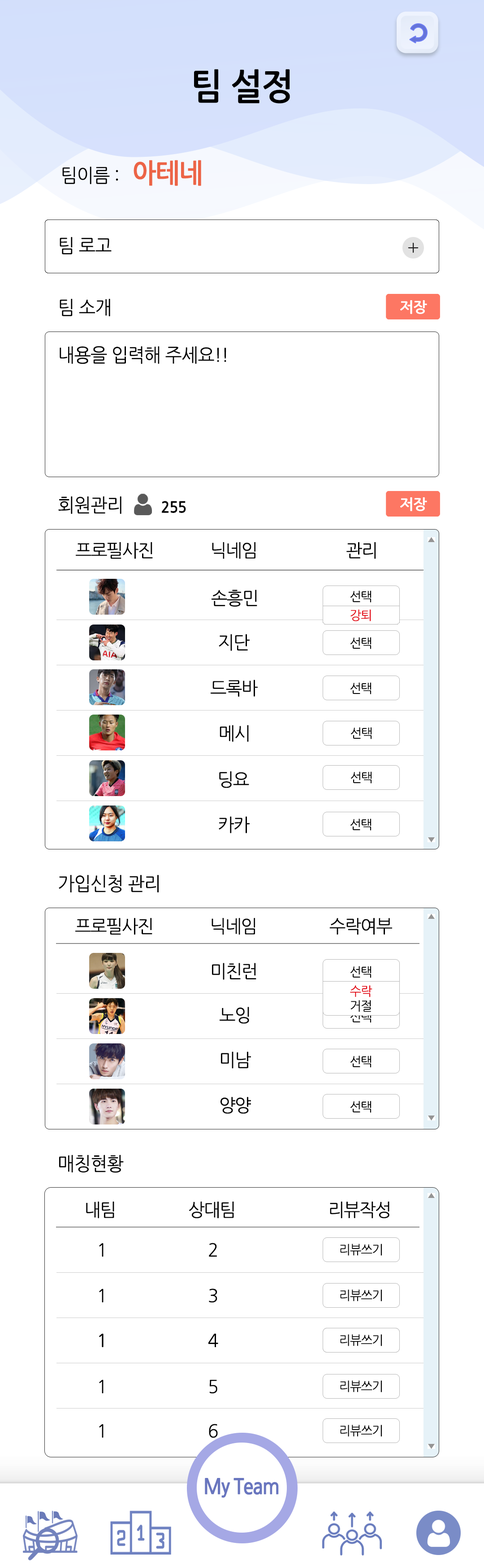
<style>
.page{position:relative;width:484px;height:1568px;background:#ffffff}
.page>*{position:absolute;margin:0}
.t1{font:35.8px "NanumGothicBold";letter-spacing:-0.025em;color:#000000;scale:0.95 1}
.t2{font:26.9px "NanumGothicBold";letter-spacing:-0.025em;color:#ec6446;scale:0.95 1}
.t3{font:18.8px "NanumGothic";letter-spacing:-0.025em;color:#000000;scale:0.95 1}
.t4{font:14.3px "NanumGothicBold";letter-spacing:-0.025em;color:#ffffff}
.t5{font:15.2px "NanumGothicBold";letter-spacing:-0.025em;color:#000000;scale:0.95 1}
.t6{font:17.9px "NanumGothic";letter-spacing:-0.05em;color:#000000}
.t7{font:12.5px "NanumGothic";letter-spacing:-0.05em;color:#000000}
.t8{font:12.5px "NanumGothic";letter-spacing:-0.05em;color:#e30613}
.t9{font:12.5px "NanumGothic";letter-spacing:-0.05em}
</style>
<div class="page">
<p class="t1" style="left:194px;top:69px;width:96px;height:34px">팀 설정</p>
<p class="t2" style="left:134px;top:160px;width:67px;height:26px">아테네</p>
<p class="t3" style="left:62px;top:167px;width:56px;height:17px">팀이름 :</p>
<p class="t3" style="left:60px;top:237px;width:52px;height:17px">팀 로고</p>
<p class="t3" style="left:60px;top:299px;width:50px;height:17px">팀 소개</p>
<p class="t4" style="left:400px;top:300px;width:27px;height:14px">저장</p>
<p class="t3" style="left:60px;top:346px;width:166px;height:18px">내용을 입력해 주세요!!</p>
<p class="t3" style="left:58px;top:496px;width:63px;height:18px">회원관리</p>
<p class="t4" style="left:400px;top:497px;width:27px;height:14px">저장</p>
<p class="t5" style="left:162px;top:501px;width:24px;height:12px">255</p>
<p class="t6" style="left:76px;top:542px;width:300px;height:17px">프로필사진              닉네임                      관리</p>
<p class="t6" style="left:211px;top:590px;width:46px;height:17px">손흥민</p>
<p class="t7" style="left:350px;top:590px;width:21px;height:13px">선택</p>
<p class="t8" style="left:350px;top:609px;width:21px;height:12px">강퇴</p>
<p class="t6" style="left:219px;top:634px;width:31px;height:17px">지단</p>
<p class="t7" style="left:350px;top:637px;width:21px;height:12px">선택</p>
<p class="t6" style="left:211px;top:680px;width:47px;height:17px">드록바</p>
<p class="t7" style="left:350px;top:682px;width:21px;height:12px">선택</p>
<p class="t6" style="left:220px;top:725px;width:29px;height:17px">메시</p>
<p class="t7" style="left:351px;top:727px;width:20px;height:12px">선택</p>
<p class="t6" style="left:219px;top:771px;width:30px;height:17px">딩요</p>
<p class="t7" style="left:351px;top:771px;width:20px;height:13px">선택</p>
<p class="t6" style="left:219px;top:816px;width:31px;height:17px">카카</p>
<p class="t7" style="left:350px;top:818px;width:21px;height:13px">선택</p>
<p class="t3" style="left:59px;top:875px;width:100px;height:18px">가입신청 관리</p>
<p class="t6" style="left:75px;top:918px;width:317px;height:17px">프로필사진              닉네임                  수락여부</p>
<p class="t6" style="left:212px;top:963px;width:44px;height:17px">미친런</p>
<p class="t7" style="left:350px;top:966px;width:21px;height:12px">선택</p>
<p class="t8" style="left:350px;top:985px;width:22px;height:12px">수락</p>
<p class="t7" style="left:350px;top:1000px;width:21px;height:12px">거절</p>
<p class="t6" style="left:220px;top:1007px;width:29px;height:17px">노잉</p>
<p class="t9" style="left:350px;top:1011px;width:21px;height:12px">선택</p>
<p class="t6" style="left:221px;top:1051px;width:30px;height:17px">미남</p>
<p class="t7" style="left:350px;top:1055px;width:21px;height:13px">선택</p>
<p class="t6" style="left:220px;top:1097px;width:31px;height:17px">양양</p>
<p class="t7" style="left:350px;top:1101px;width:21px;height:12px">선택</p>
<p class="t3" style="left:59px;top:1155px;width:65px;height:18px">매칭현황</p>
<p class="t6" style="left:86px;top:1202px;width:303px;height:17px">내팀                  상대팀                       리뷰작성</p>
<p class="t6" style="left:99px;top:1243px;width:4px;height:14px">1</p>
<p class="t6" style="left:209px;top:1243px;width:8px;height:14px">2</p>
<p class="t7" style="left:340px;top:1244px;width:42px;height:12px">리뷰쓰기</p>
<p class="t6" style="left:99px;top:1289px;width:4px;height:13px">1</p>
<p class="t6" style="left:209px;top:1288px;width:8px;height:15px">3</p>
<p class="t7" style="left:340px;top:1289px;width:42px;height:12px">리뷰쓰기</p>
<p class="t6" style="left:99px;top:1334px;width:4px;height:13px">1</p>
<p class="t6" style="left:99px;top:1334px;width:4px;height:13px">1</p>
<p class="t6" style="left:208px;top:1334px;width:10px;height:13px">4</p>
<p class="t6" style="left:208px;top:1334px;width:10px;height:13px">4</p>
<p class="t7" style="left:340px;top:1334px;width:42px;height:12px">리뷰쓰기</p>
<p class="t7" style="left:340px;top:1334px;width:42px;height:12px">리뷰쓰기</p>
<p class="t6" style="left:99px;top:1380px;width:4px;height:13px">1</p>
<p class="t6" style="left:209px;top:1380px;width:8px;height:14px">5</p>
<p class="t7" style="left:340px;top:1380px;width:42px;height:12px">리뷰쓰기</p>
<p class="t6" style="left:99px;top:1424px;width:4px;height:14px">1</p>
<p class="t6" style="left:209px;top:1424px;width:9px;height:14px">6</p>
<p class="t7" style="left:340px;top:1425px;width:42px;height:12px">리뷰쓰기</p>
</div>
